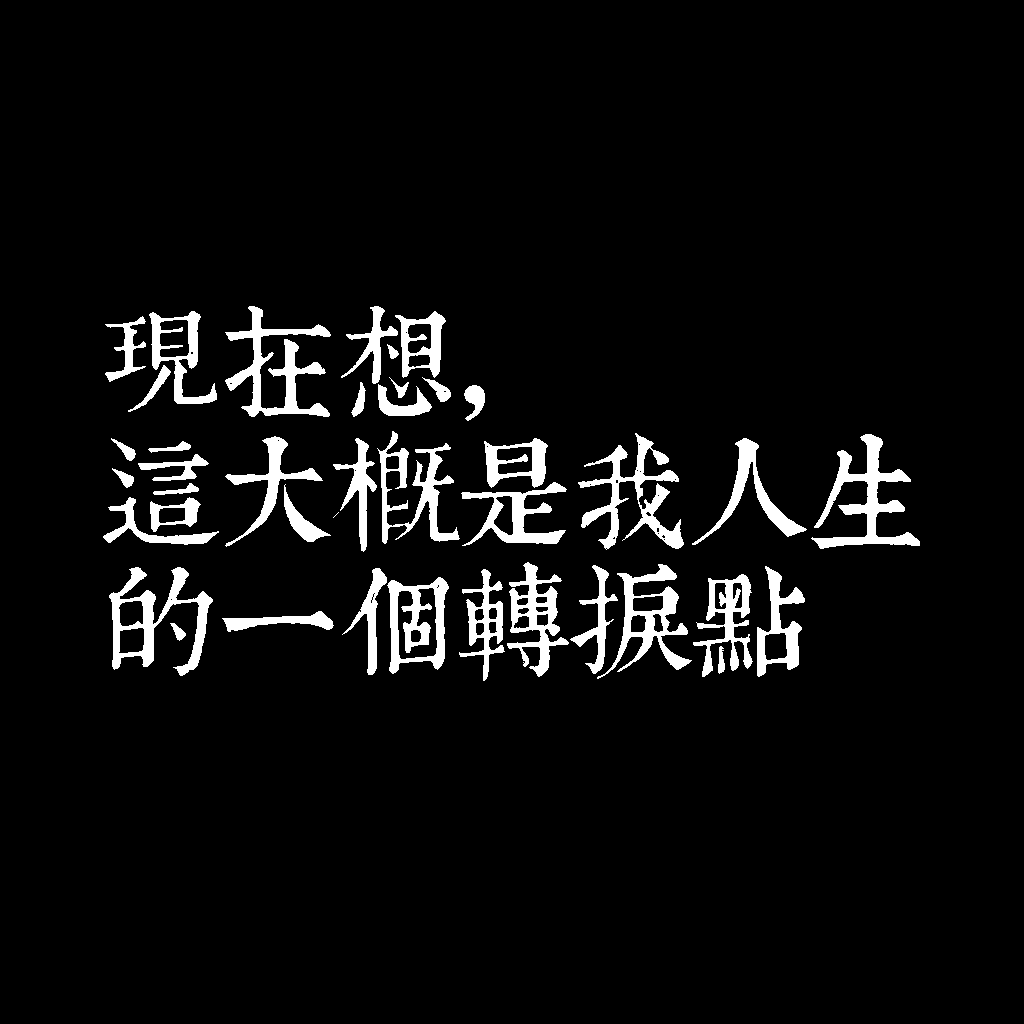
<style>
.page{position:relative;width:1024px;height:1024px;background:#000000}
.page>*{position:absolute;margin:0}
.t1{font:120px/130px "TpldKhangXiDictTrial";letter-spacing:-0.02em;color:#ffffff}
</style>
<div class="page">
<p class="t1" style="left:103px;top:306px;width:817px;height:375px">現在想，<br>這大概是我人生<br>的一個轉捩點</p>
</div>
